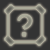
<style>
.page{position:relative;width:50px;height:50px;background:#333333}
.page>*{position:absolute;margin:0}
.t1{font:32px "MagicR-HM";color:#a1a191}
</style>
<div class="page">
<p class="t1" style="left:17px;top:14px;width:16px;height:23px">?</p>
</div>
